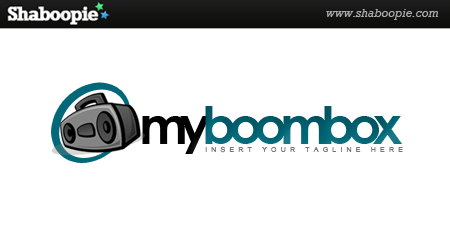
<style>
.page{position:relative;width:450px;height:250px;background:#ffffff}
.page>*{position:absolute;margin:0}
.t1{font:52px "CenturyGothic-Bold";letter-spacing:-0.15em;color:#006878}
.t2{font:52px "CenturyGothic-Bold";letter-spacing:-0.15em;color:#000000}
.t3{font:7px "ArialMT";letter-spacing:0.6em;color:#757575}
</style>
<div class="page">
<p class="t1" style="left:142px;top:106px;width:260px;height:48px"><span class="t2">my</span>boombox</p>
<p class="t3" style="left:205px;top:146px;width:198px;height:7px">INSERT YOUR TAGLINE HERE</p>
</div>
